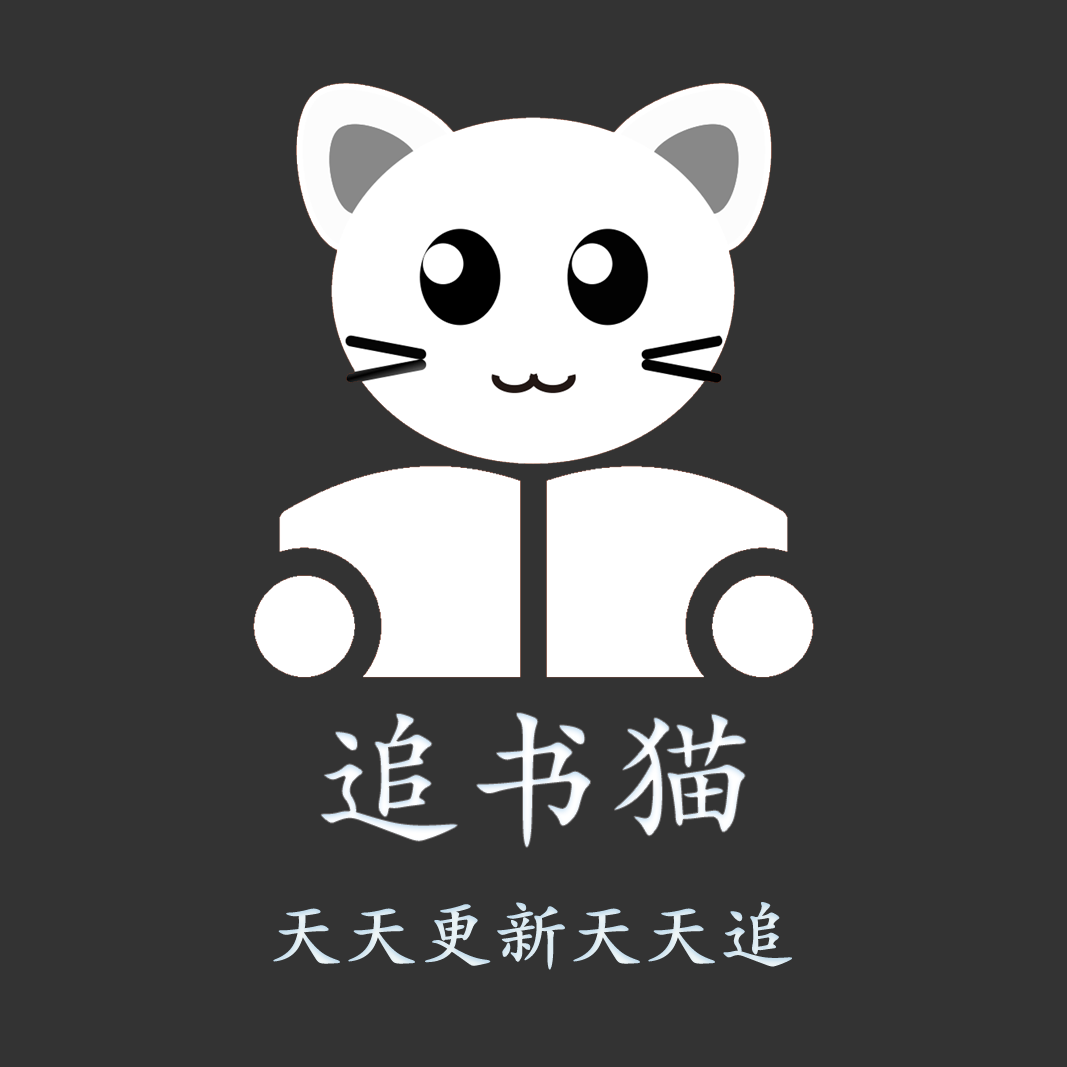
<style>
.page{position:relative;width:1067px;height:1067px;background:#333333}
.page>*{position:absolute;margin:0}
.t1{font:150px "STKaitiSC-Bold";color:#ffffff}
.t2{font:75px "STKaitiSC-Bold";color:#daeaf2}
</style>
<div class="page">
<p class="t1" style="left:320px;top:712px;width:427px;height:136px">追书猫</p>
<p class="t2" style="left:273px;top:902px;width:519px;height:68px">天天更新天天追</p>
</div>
